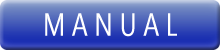
<style>
.page{position:relative;width:220px;height:50px}
.page>*{position:absolute;margin:0}
.t1{font:32px "SegoeCondensed";letter-spacing:0.2em;color:#ffffff}
</style>
<div class="page">
<p class="t1" style="left:45px;top:13px;width:132px;height:24px">MANUAL</p>
</div>
